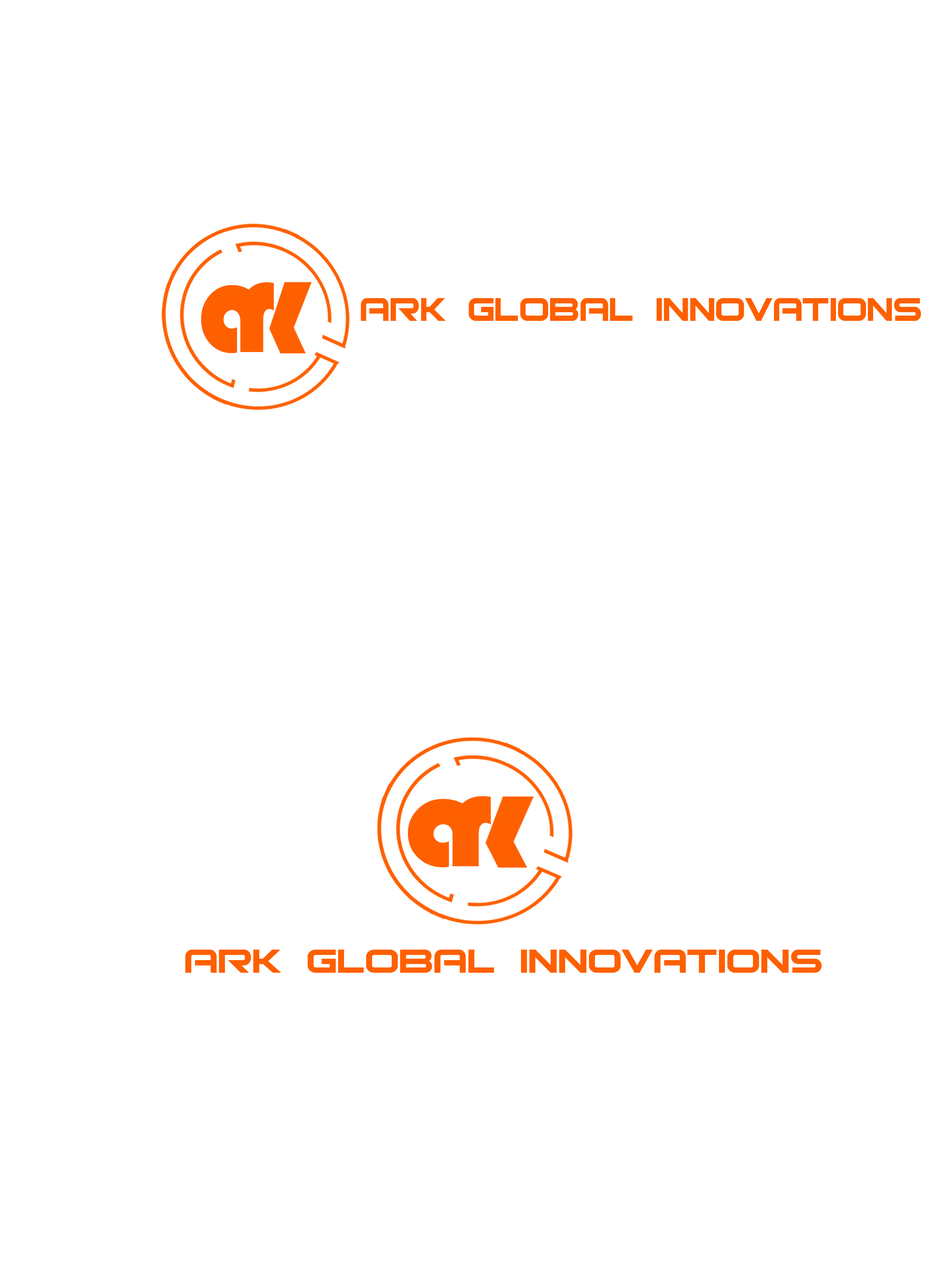
<style>
.page{position:relative;width:946px;height:1261px;background:#ffffff}
.page>*{position:absolute;margin:0}
.t1{font:140px "Bauhaus93";color:#fe6000;scale:0.89 1}
.t2{font:134.2px "Bauhaus93";color:#fe6000;scale:0.9 1}
.t3{font:44.5px "Bitsumishi";color:#fe6000}
.t4{font:140.7px "Bauhaus93";color:#fe6000}
.t5{font:134.9px "Bauhaus93";color:#fe6000}
.t6{font:44.5px "Bitsumishi";color:#fe6000;scale:1.11 1}
</style>
<div class="page">
<p class="t1" style="left:240px;top:282px;width:34px;height:70px">r</p>
<p class="t2" style="left:201px;top:285px;width:61px;height:68px">a</p>
<p class="t3" style="left:361px;top:298px;width:560px;height:23px">ARK Global innovations</p>
<p class="t4" style="left:452px;top:796px;width:39px;height:70px">r</p>
<p class="t5" style="left:408px;top:799px;width:70px;height:68px">a</p>
<p class="t6" style="left:185px;top:950px;width:636px;height:23px">ARK Global innovations</p>
</div>
